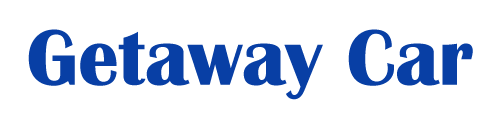
<style>
.page{position:relative;width:500px;height:126px;background:#ffffff}
.page>*{position:absolute;margin:0}
.t1{font:81.6px "BritannicBold";color:#083fa5}
</style>
<div class="page">
<p class="t1" style="left:28px;top:29px;width:445px;height:71px">Getaway Car</p>
</div>
